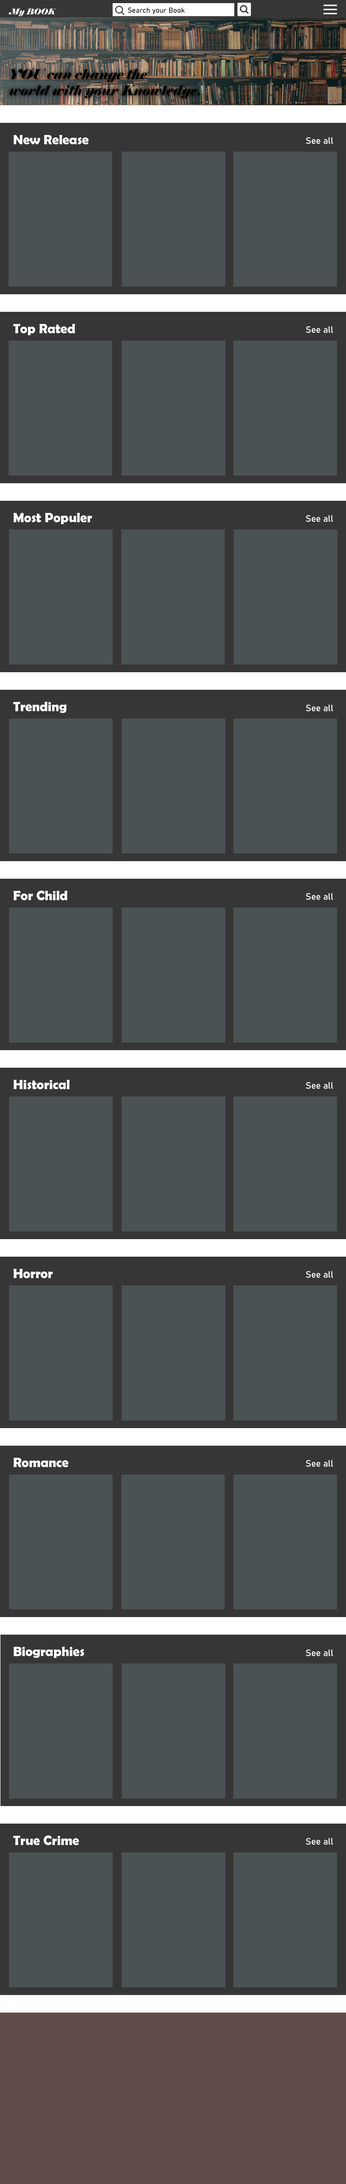
<style>
.page{position:relative;width:346px;height:2184px;background:#4a5254}
.page>*{position:absolute;margin:0}
.t1{font:8.1px "Elephant-Italic";color:#ffffff}
.t2{font:7.2px "Bahnschrift";color:#010000}
.t3{font:13.5px "Elephant-Italic";color:#000000}
.t4{font:13.5px "BerlinSansFBDemi-Bold";color:#fefefe}
.t5{font:9px "Bahnschrift";color:#ffffff}
</style>
<div class="page">
<p class="t1" style="left:9px;top:8px;width:47px;height:9px">My BOOK</p>
<p class="t2" style="left:127px;top:7px;width:57px;height:7px">Search your Book</p>
<p class="t3" style="left:9px;top:69px;width:191px;height:30px">YOU can change the <br>world with your Knowledge.</p>
<p class="t4" style="left:14px;top:135px;width:75px;height:9px">New Release</p>
<p class="t5" style="left:306px;top:137px;width:27px;height:7px">See all</p>
<p class="t4" style="left:13px;top:324px;width:62px;height:11px">Top Rated</p>
<p class="t5" style="left:306px;top:326px;width:27px;height:7px">See all</p>
<p class="t4" style="left:14px;top:513px;width:78px;height:11px">Most Populer</p>
<p class="t5" style="left:306px;top:515px;width:27px;height:7px">See all</p>
<p class="t4" style="left:13px;top:702px;width:54px;height:11px">Trending</p>
<p class="t5" style="left:306px;top:705px;width:27px;height:6px">See all</p>
<p class="t4" style="left:14px;top:891px;width:54px;height:9px">For Child</p>
<p class="t5" style="left:306px;top:893px;width:27px;height:7px">See all</p>
<p class="t4" style="left:14px;top:1080px;width:56px;height:9px">Historical</p>
<p class="t5" style="left:306px;top:1082px;width:27px;height:7px">See all</p>
<p class="t4" style="left:14px;top:1269px;width:39px;height:9px">Horror</p>
<p class="t5" style="left:306px;top:1271px;width:27px;height:7px">See all</p>
<p class="t4" style="left:14px;top:1458px;width:54px;height:9px">Romance</p>
<p class="t5" style="left:306px;top:1460px;width:27px;height:7px">See all</p>
<p class="t4" style="left:14px;top:1647px;width:70px;height:11px">Biographies</p>
<p class="t5" style="left:306px;top:1650px;width:27px;height:6px">See all</p>
<p class="t4" style="left:13px;top:1836px;width:66px;height:9px">True Crime</p>
<p class="t5" style="left:306px;top:1838px;width:27px;height:7px">See all</p>
</div>
